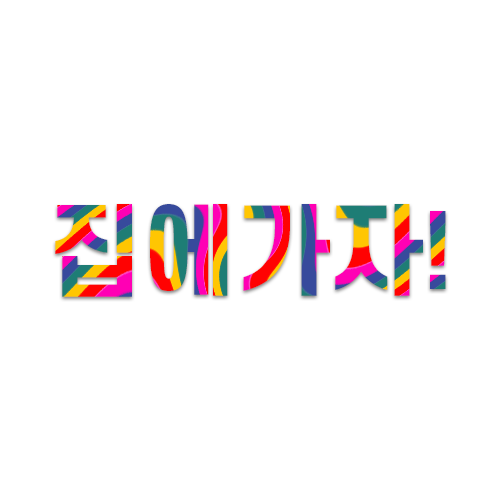
<style>
.page{position:relative;width:500px;height:500px;background:#ffffff}
.page>*{position:absolute;margin:0}
.t1{font:99.4px "S-CoreDream-7ExtraBold";letter-spacing:-0.02em}
</style>
<div class="page">
<p class="t1" style="left:55px;top:204px;width:391px;height:93px">집에가자!</p>
</div>
